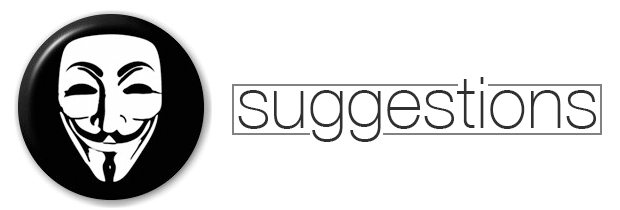
<style>
.page{position:relative;width:620px;height:210px;background:#ffffff}
.page>*{position:absolute;margin:0}
.t1{font:72px "HelveticaNeue-Thin";color:#303030}
</style>
<div class="page">
<p class="t1" style="left:238px;top:77px;width:358px;height:65px">suggestions</p>
</div>
